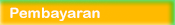
<style>
.page{position:relative;width:175px;height:25px;background:#ffba00}
.page>*{position:absolute;margin:0}
.t1{font:14.2px "ArialRoundedMTBold";color:#fdfcfc;scale:1.07 1}
</style>
<div class="page">
<p class="t1" style="left:10px;top:7px;width:90px;height:14px">Pembayaran</p>
</div>
